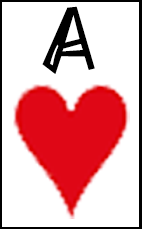
<style>
.page{position:relative;width:142px;height:229px;background:#ffffff}
.page>*{position:absolute;margin:0}
.t1{font:75px "Jokerman-Regular";color:#000000;scale:0.9 1}
</style>
<div class="page">
<p class="t1" style="left:42px;top:6px;width:53px;height:68px">A</p>
</div>
